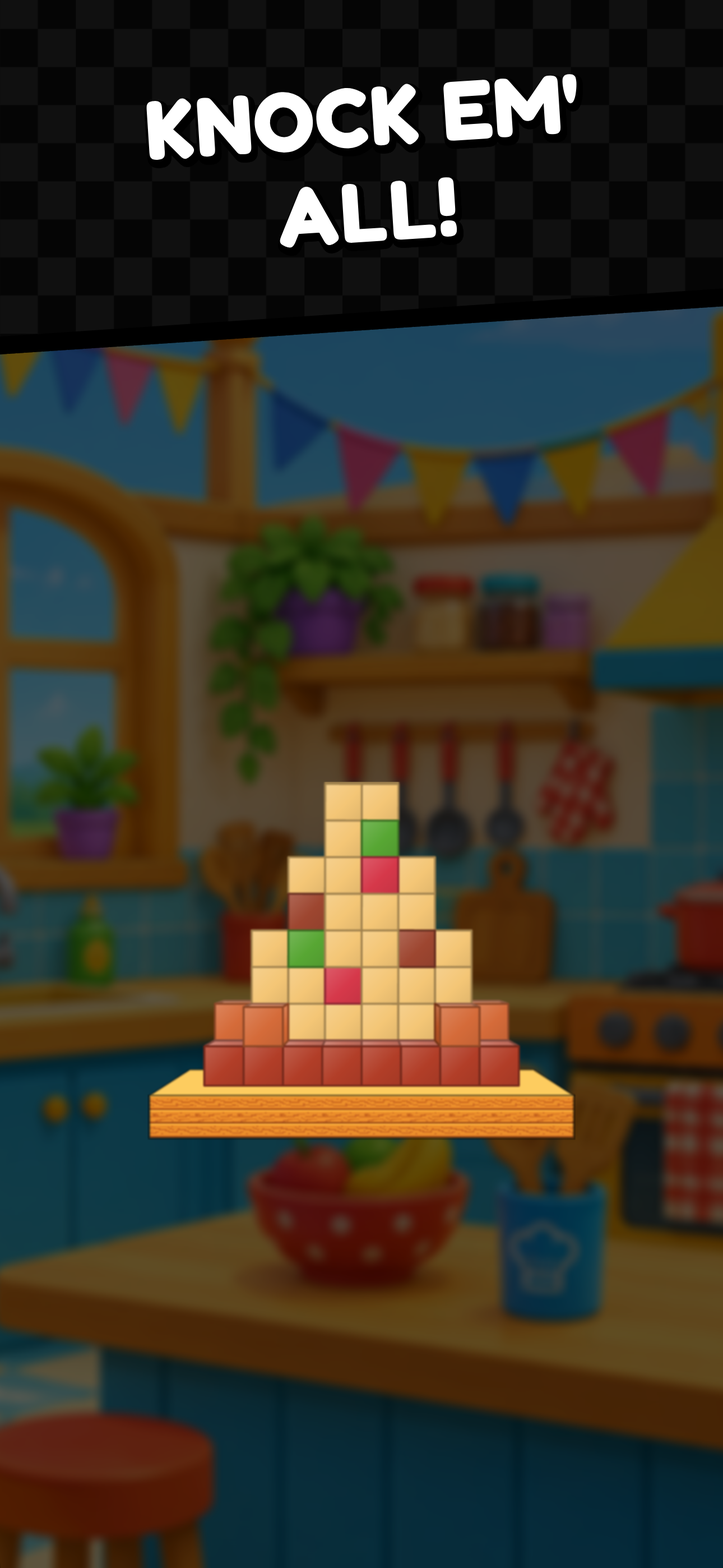
<style>
.page{position:relative;width:723px;height:1568px}
.page>*{position:absolute;margin:0}
.t1{font:84.1px/95.3px "Fredoka-Bold";letter-spacing:0.015em;color:#ffffff}
</style>
<div class="page">
<p class="t1" style="left:146px;top:73px;width:431px;height:175px;text-align:center;rotate:-4deg">KNOCK EM'<br>ALL!</p>
</div>
